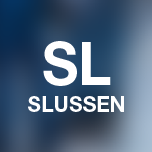
<style>
.page{position:relative;width:152px;height:152px}
.page>*{position:absolute;margin:0}
.t1{font:22.3px "HelveticaNeueLTStd-Bd";color:#ffffff;scale:0.94 1}
.t2{font:59.8px "HelveticaNeueLTStd-Bd";color:#ffffff;scale:0.94 1}
</style>
<div class="page">
<p class="t1" style="left:28px;top:41px;width:96px;height:71px;text-align:center"><span class="t2">SL<br></span>SLUSSEN</p>
</div>
